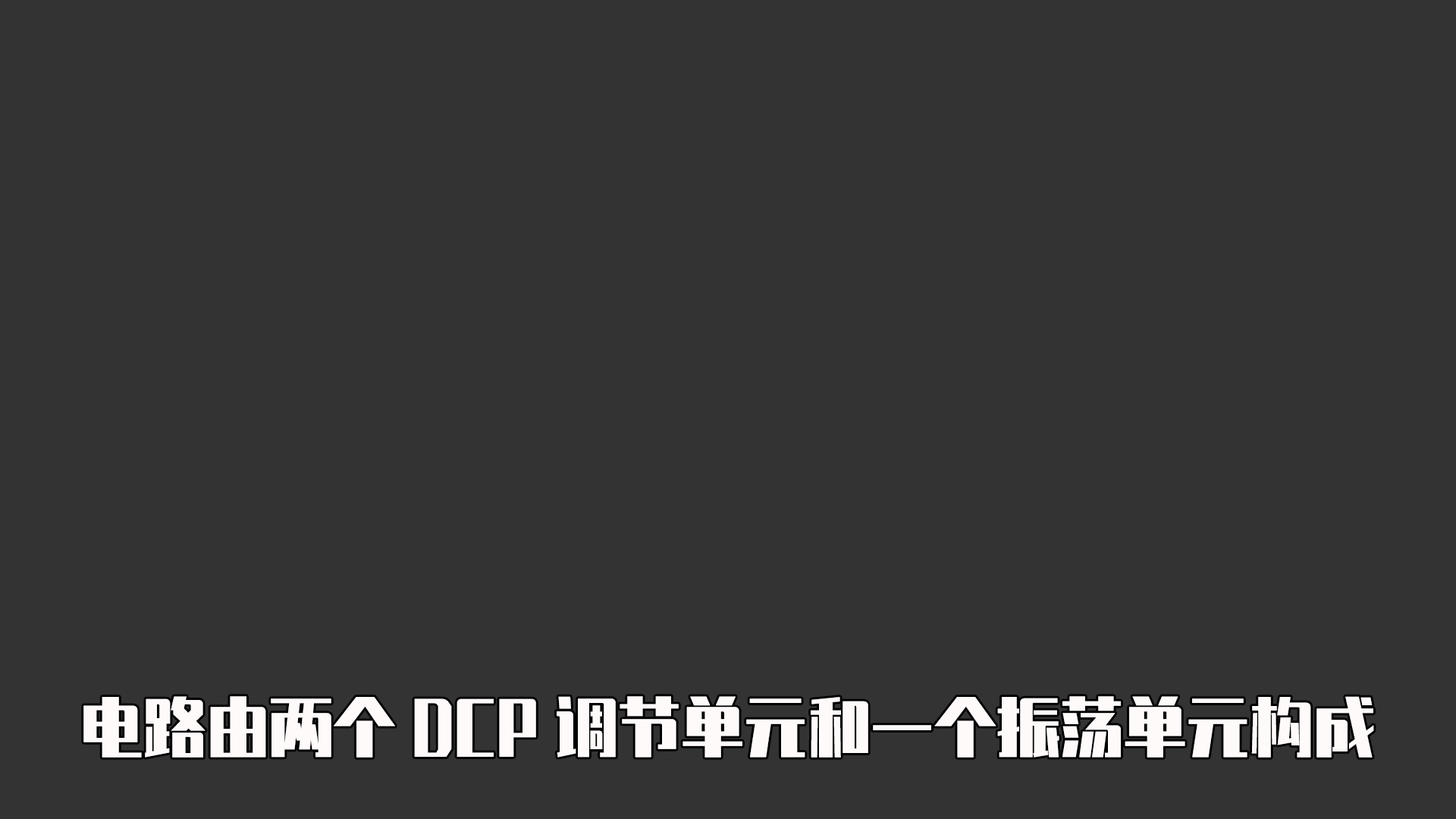
<style>
.page{position:relative;width:1456px;height:819px;background:#333333}
.page>*{position:absolute;margin:0}
.t1{font:63.2px "ZhenyanGB-Regular";color:#fefafa}
</style>
<div class="page">
<p class="t1" style="left:83px;top:696px;width:1291px;height:62px">电路由两个DCP调节单元和一个振荡单元构成</p>
</div>
